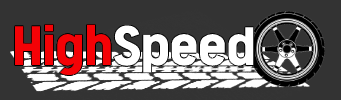
<style>
.page{position:relative;width:341px;height:100px;background:#333333}
.page>*{position:absolute;margin:0}
.t1{font:50.4px "dDiam";color:#ffffff}
.t2{font:50.4px "dDiam";color:#f40206}
</style>
<div class="page">
<p class="t1" style="left:15px;top:24px;width:239px;height:51px"><span class="t2">High</span>Speed</p>
</div>
